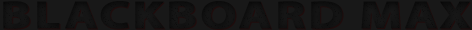
<style>
.page{position:relative;width:472px;height:30px;background:#181818}
.page>*{position:absolute;margin:0}
.t1{font:39.5px "MyriadPro-Bold";letter-spacing:0.045em;color:#0e0e0e;font-weight:bold;scale:1.26 1}
</style>
<div class="page">
<p class="t1" style="left:3px;top:1px;width:468px;height:28px">BLACKBOARD MAX</p>
</div>
